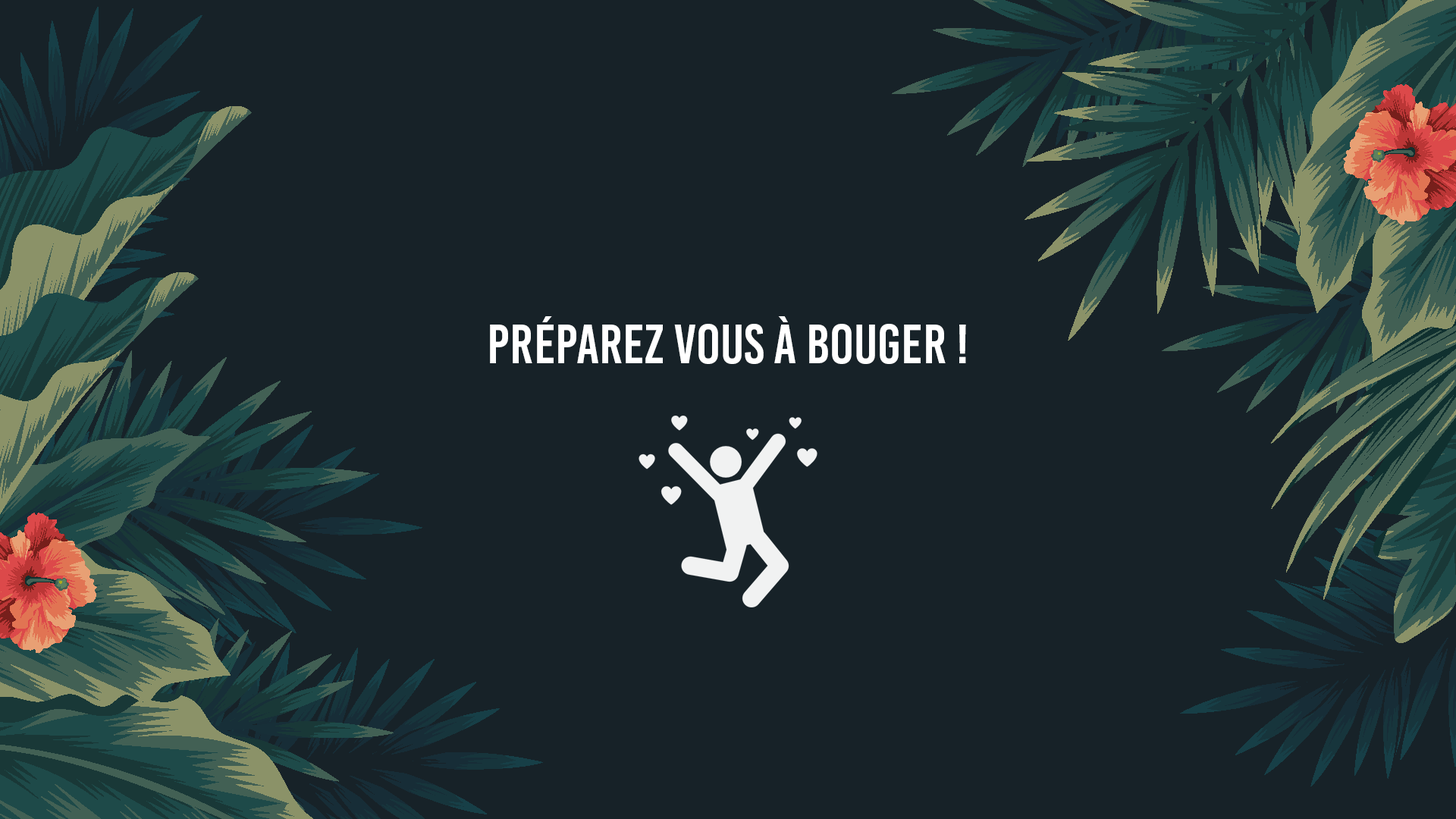
<style>
.page{position:relative;width:1456px;height:819px;background:#172228}
.page>*{position:absolute;margin:0}
.t1{font:55.6px "BebasKai";color:#ffffff}
</style>
<div class="page">
<p class="t1" style="left:490px;top:316px;width:476px;height:48px">Préparez vous à BOUGER !</p>
</div>
